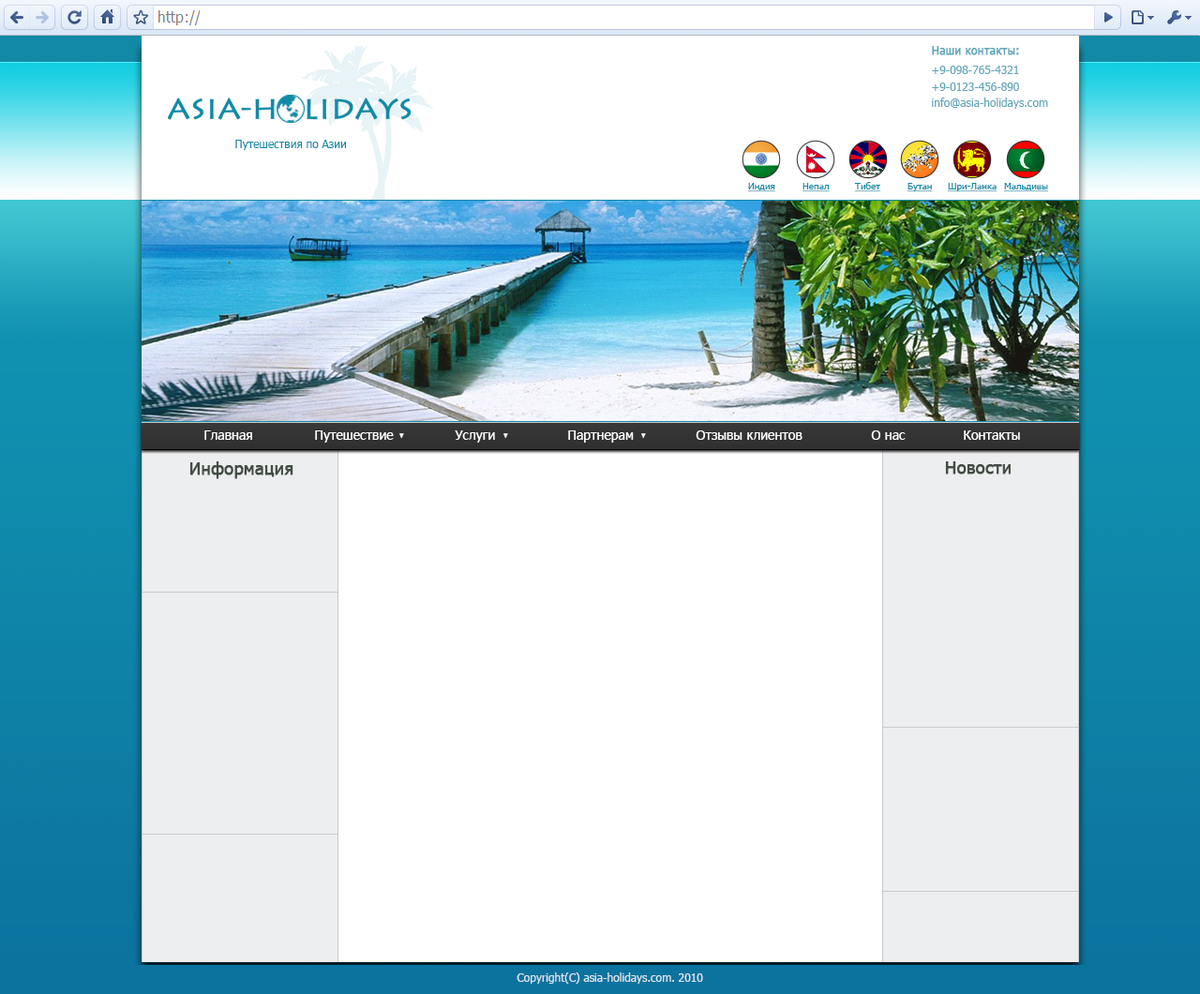
<style>
.page{position:relative;width:1200px;height:994px;background:#ffffff}
.page>*{position:absolute;margin:0}
.t1{font:11.2px "Tahoma";color:#5fa5bb;font-weight:bold}
.t2{font:11.2px "Tahoma";color:#5fa5bb}
.t3{font:11.2px "Tahoma";color:#128aa7}
.t4{font:9.4px "Tahoma";color:#128aa7;text-decoration:underline}
.t5{font:13.1px "Tahoma";color:#ffffff}
.t6{font:16.9px "Tahoma";color:#424c43;font-weight:bold}
.t7{font:11.2px "Tahoma";color:#dee7ee}
</style>
<div class="page">
<p class="t1" style="left:932px;top:46px;width:87px;height:9px">Наши контакты:</p>
<p class="t2" style="left:932px;top:66px;width:87px;height:8px">+9-098-765-4321</p>
<p class="t2" style="left:932px;top:82px;width:87px;height:9px">+9-0123-456-890</p>
<p class="t2" style="left:932px;top:97px;width:116px;height:12px">info@asia-holidays.com</p>
<p class="t3" style="left:235px;top:140px;width:111px;height:10px">Путешествия по Азии</p>
<p class="t4" style="left:748px;top:183px;width:27px;height:9px">Индия</p>
<p class="t4" style="left:802px;top:183px;width:28px;height:9px">Непал</p>
<p class="t4" style="left:854px;top:182px;width:26px;height:10px">Тибет</p>
<p class="t4" style="left:907px;top:183px;width:26px;height:9px">Бутан</p>
<p class="t4" style="left:948px;top:183px;width:49px;height:9px">Шри-Ланка</p>
<p class="t4" style="left:1004px;top:183px;width:44px;height:9px">Мальдивы</p>
<p class="t5" style="left:204px;top:430px;width:48px;height:10px">Главная</p>
<p class="t5" style="left:315px;top:430px;width:79px;height:12px">Путешествие</p>
<p class="t5" style="left:455px;top:430px;width:40px;height:12px">Услуги</p>
<p class="t5" style="left:568px;top:430px;width:66px;height:12px">Партнерам</p>
<p class="t5" style="left:696px;top:430px;width:106px;height:10px">Отзывы клиентов</p>
<p class="t5" style="left:871px;top:430px;width:35px;height:10px">О нас</p>
<p class="t5" style="left:964px;top:430px;width:56px;height:10px">Контакты</p>
<p class="t6" style="left:189px;top:461px;width:104px;height:18px">Информация</p>
<p class="t6" style="left:945px;top:461px;width:66px;height:13px">Новости</p>
<p class="t7" style="left:517px;top:972px;width:186px;height:11px">Copyright(C) asia-holidays.com. 2010</p>
</div>
